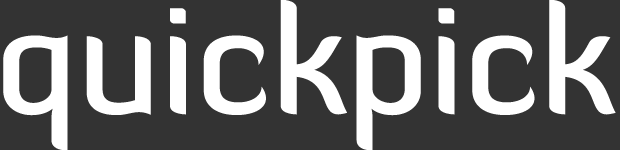
<style>
.page{position:relative;width:620px;height:150px;background:#333333}
.page>*{position:absolute;margin:0}
.t1{font:150px "DiavloMedium-Regular";color:#ffffff}
</style>
<div class="page">
<p class="t1" style="left:3px;top:0px;width:613px;height:151px">quickpick</p>
</div>
